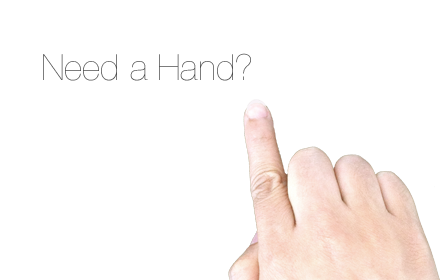
<style>
.page{position:relative;width:440px;height:280px;background:#ffffff}
.page>*{position:absolute;margin:0}
.t1{font:36px "HelveticaNeue-UltraLight";color:#4d4d4d}
</style>
<div class="page">
<p class="t1" style="left:43px;top:53px;width:208px;height:28px">Need a Hand?</p>
</div>
